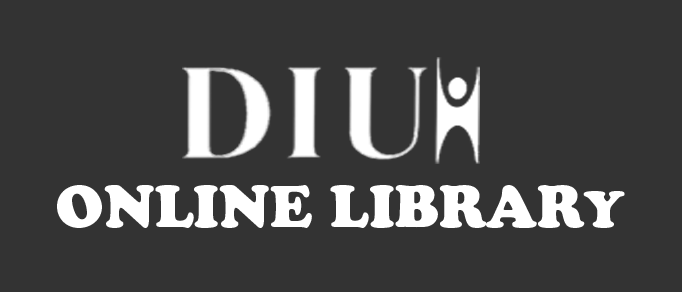
<style>
.page{position:relative;width:682px;height:292px;background:#333333}
.page>*{position:absolute;margin:0}
.t1{font:58.3px "CooperBlackStd";color:#ffffff}
.t2{font:50px "CooperBlackStd";color:#ffffff}
</style>
<div class="page">
<p class="t1" style="left:57px;top:185px;width:568px;height:43px">ONLINE LIBRAR<span class="t2">Y</span></p>
</div>
